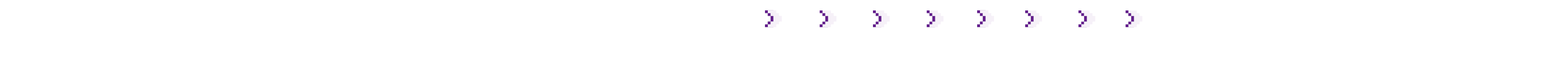
<style>
.page{position:relative;width:1568px;height:74px;background:#ffffff}
.page>*{position:absolute;margin:0}
.t1{font:44.7px "Lady-Radical";letter-spacing:0.06em}
.t2{font:44.7px "Lady-Radical";letter-spacing:0.06em;color:#f6f1f8}
</style>
<div class="page">
<p class="t1" style="left:765px;top:10px;width:14px;height:18px">&gt;</p>
<p class="t2" style="left:768px;top:10px;width:14px;height:18px">&gt;</p>
<p class="t1" style="left:820px;top:10px;width:14px;height:18px">&gt;</p>
<p class="t2" style="left:823px;top:10px;width:14px;height:18px">&gt;</p>
<p class="t1" style="left:873px;top:10px;width:14px;height:18px">&gt;</p>
<p class="t2" style="left:876px;top:10px;width:14px;height:18px">&gt;</p>
<p class="t1" style="left:927px;top:10px;width:14px;height:18px">&gt;</p>
<p class="t2" style="left:930px;top:10px;width:14px;height:18px">&gt;</p>
<p class="t1" style="left:977px;top:10px;width:14px;height:18px">&gt;</p>
<p class="t2" style="left:980px;top:10px;width:14px;height:18px">&gt;</p>
<p class="t1" style="left:1025px;top:10px;width:14px;height:18px">&gt;</p>
<p class="t2" style="left:1028px;top:10px;width:14px;height:18px">&gt;</p>
<p class="t1" style="left:1078px;top:10px;width:15px;height:18px">&gt;</p>
<p class="t2" style="left:1081px;top:10px;width:15px;height:18px">&gt;</p>
<p class="t1" style="left:1126px;top:10px;width:14px;height:18px">&gt;</p>
<p class="t2" style="left:1128px;top:10px;width:15px;height:18px">&gt;</p>
</div>
